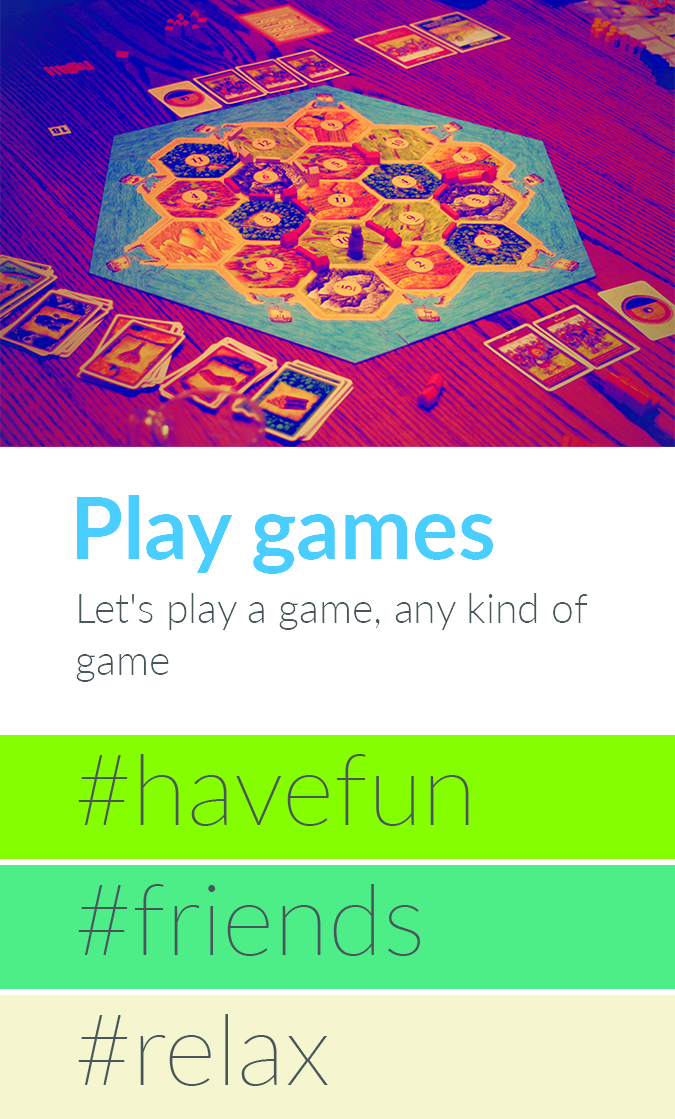
<style>
.page{position:relative;width:675px;height:1119px;background:#ffffff}
.page>*{position:absolute;margin:0}
.t1{font:86px "Lato-Bold";color:#4acdff}
.t2{font:41px/52px "Lato-Light";color:#48585a}
</style>
<div class="page">
<p class="t1" style="left:76px;top:495px;width:417px;height:79px">Play games</p>
<p class="t2" style="left:76px;top:593px;width:512px;height:89px;text-align:right">Let's play a game, any kind of game</p>
</div>
